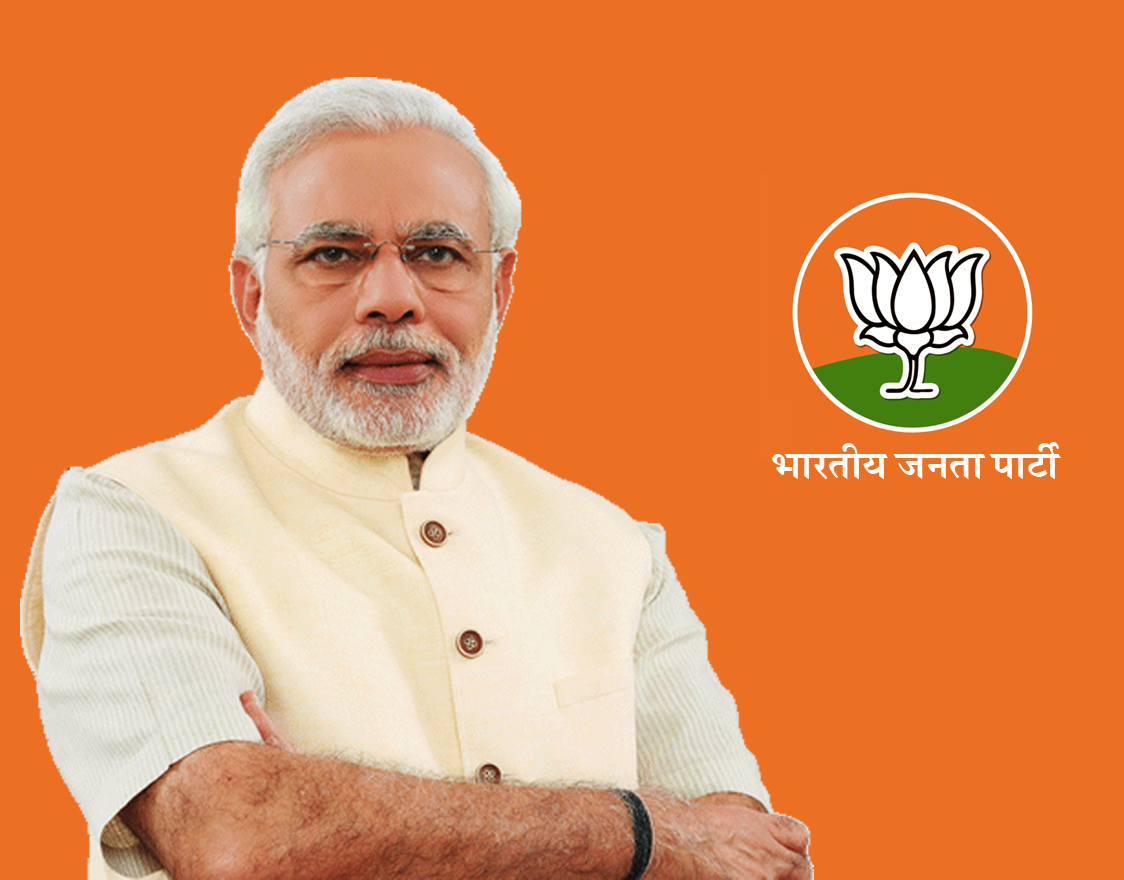
<style>
.page{position:relative;width:1124px;height:880px;background:#ec7024}
.page>*{position:absolute;margin:0}
.t1{font:49.1px "Kruti-Dev680";color:#ffffff}
</style>
<div class="page">
<p class="t1" style="left:772px;top:442px;width:289px;height:38px">Hkkjrh; turk ikVhZ</p>
</div>
